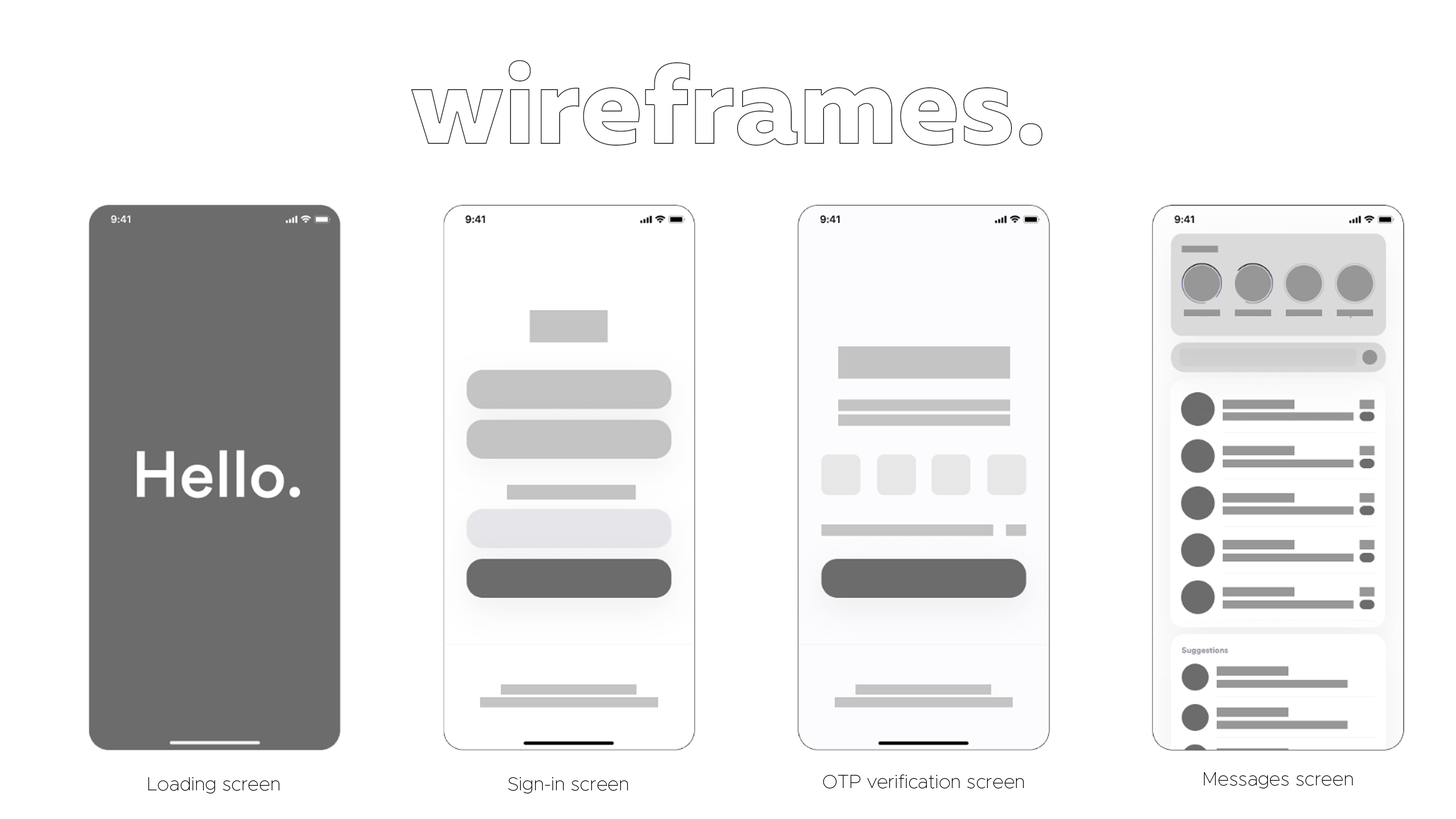
<style>
.page{position:relative;width:1456px;height:819px;background:#ffffff}
.page>*{position:absolute;margin:0}
.t1{font:19px "Metropolis-Thin";color:#000000}
</style>
<div class="page">
<p class="t1" style="left:1204px;top:772px;width:149px;height:17px">Messages screen</p>
<p class="t1" style="left:148px;top:777px;width:131px;height:17px">Loading screen</p>
<p class="t1" style="left:508px;top:777px;width:120px;height:17px">Sign-in screen</p>
<p class="t1" style="left:823px;top:774px;width:201px;height:15px">OTP verification screen</p>
</div>
